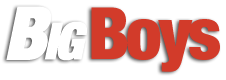
<style>
.page{position:relative;width:226px;height:80px;background:#ffffff}
.page>*{position:absolute;margin:0}
.t1{font:72px "HelveticaNeueLTPro-BlkCn";letter-spacing:-0.05em;color:#cf2c1a}
.t2{font:72px "HelveticaNeueLTPro-BlkCnO";letter-spacing:-0.05em;color:#ffffff;font-weight:bold}
.t3{font:72px "HelveticaNeueLTPro-BlkCnO";letter-spacing:-0.05em;color:#ffffff;font-variant:small-caps;font-weight:bold}
</style>
<div class="page">
<p class="t1" style="left:6px;top:6px;width:214px;height:66px;opacity:0.93"><span class="t2">B</span><span class="t3">ig </span>Boys</p>
</div>
